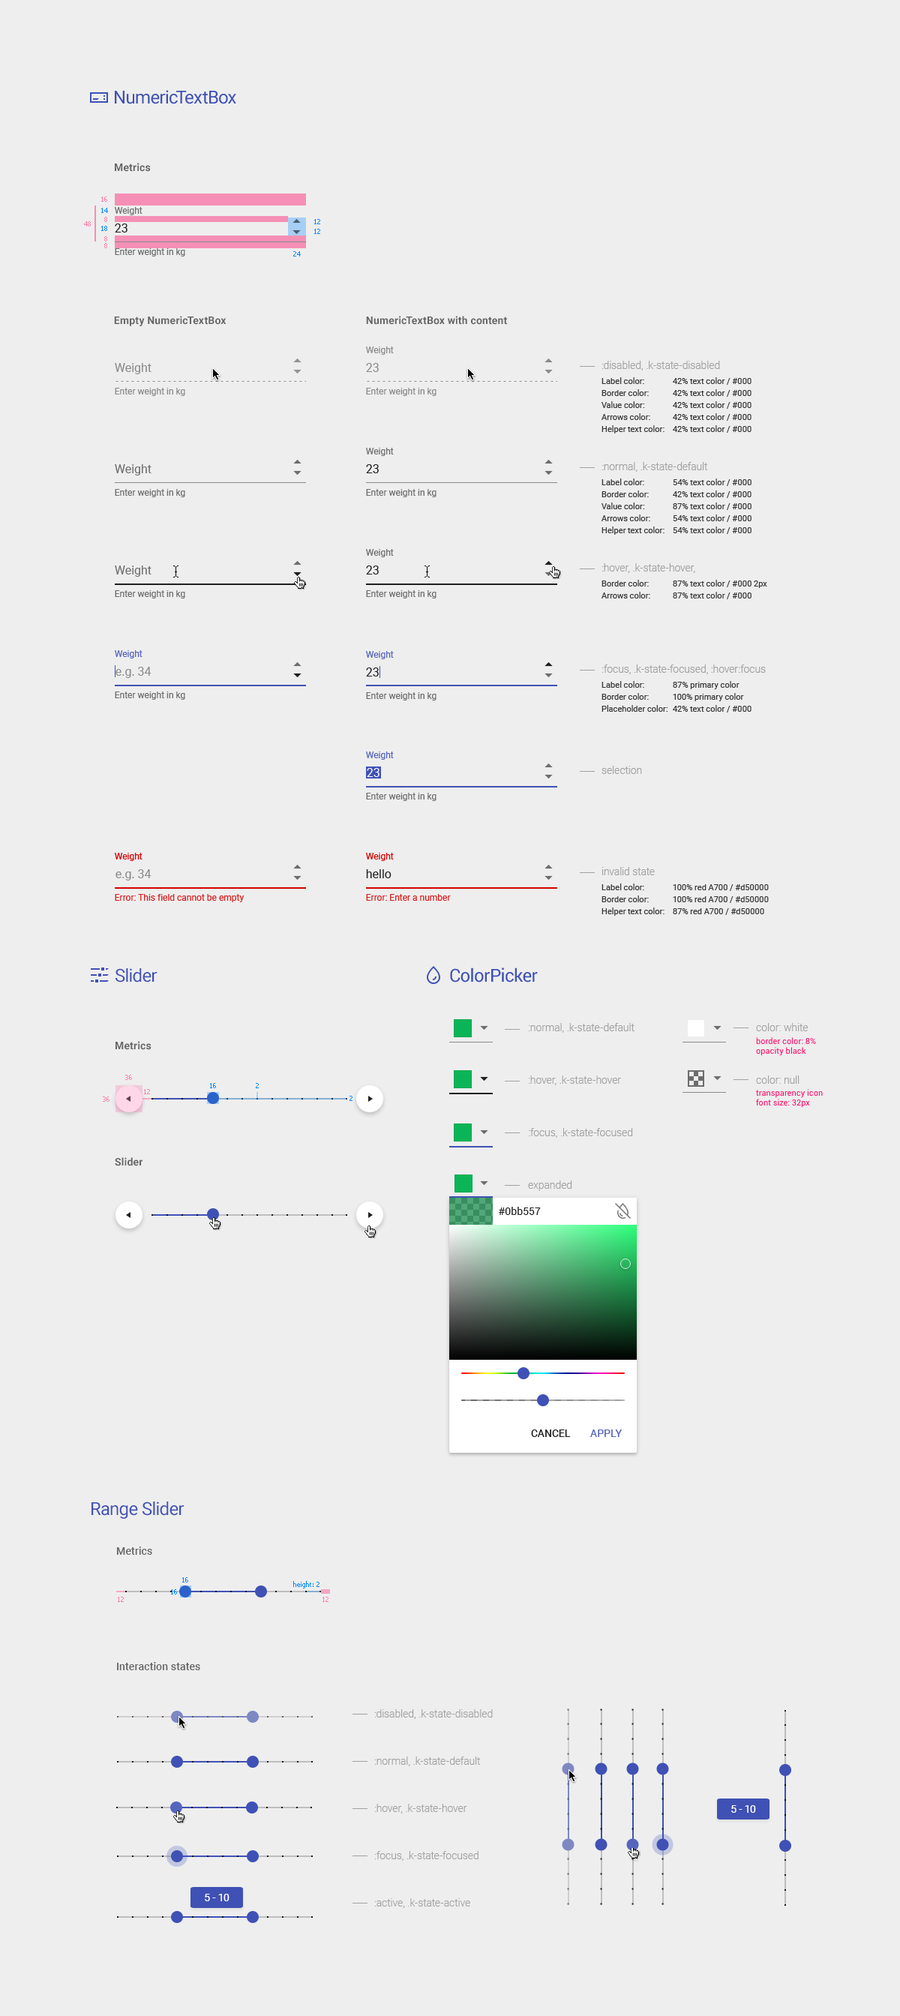
<style>
.page{position:relative;width:900px;height:2016px;background:#eeeeee}
.page>*{position:absolute;margin:0}
.t1{font:18px "Roboto-Regular";letter-spacing:-0.025em;color:#3f51b5}
.t2{font:10.5px "Roboto-Bold";letter-spacing:0.01em;color:#656565}
.t3{font:6.8px "Tahoma";color:#ff7cae}
.t4{font:6.8px "Tahoma";color:#008aff}
.t5{font:9px "Roboto-Regular";color:#6d6d6d}
.t6{font:12px "Roboto-Regular";color:#1f1f1f}
.t7{font:9px "Roboto-Regular";color:#8a8a8a}
.t8{font:12px "Roboto-Regular";color:#8a8a8a}
.t9{font:8.2px/12px "Roboto-Regular";color:#383838}
.t10{font:8.2px/54px "Roboto-Regular";color:#383838}
.t11{font:12px "Roboto-Regular";color:#6d6d6d}
.t12{font:9px "Roboto-Regular";color:#3f51b5}
.t13{font:12px "Roboto-Regular";color:#ffffff}
.t14{font:9px "Roboto-Regular";color:#d50000}
.t15{font:9px "Roboto-Regular";color:#d81f1f}
.t16{font:10.5px/52.5px "Roboto-Light";color:#a1a1a1}
.t17{font:8.2px "Roboto-Regular";color:#ff0061}
.t18{font:10.5px "Roboto-Regular";color:#212121}
.t19{font:10.5px "Roboto-Medium";color:#212121;text-transform:uppercase}
.t20{font:10.5px "Roboto-Medium";color:#5868bf;text-transform:uppercase}
.t21{font:10.5px "Roboto-Medium";letter-spacing:0.01em;color:#656565}
.t22{font:10.5px/47.2px "Roboto-Light";color:#a1a1a1}
.t23{font:10.5px "Roboto-Regular";color:#ffffff}
</style>
<div class="page">
<p class="t1" style="left:115px;top:90px;width:121px;height:14px">NumericTextBox</p>
<p class="t2" style="left:115px;top:163px;width:36px;height:9px">Metrics</p>
<p class="t3" style="left:101px;top:196px;width:6px;height:6px">16</p>
<p class="t4" style="left:101px;top:208px;width:7px;height:5px">14</p>
<p class="t5" style="left:115px;top:207px;width:27px;height:8px">Weight</p>
<p class="t3" style="left:84px;top:221px;width:7px;height:5px">48</p>
<p class="t3" style="left:104px;top:217px;width:3px;height:5px">8</p>
<p class="t4" style="left:314px;top:219px;width:6px;height:5px">12</p>
<p class="t4" style="left:101px;top:226px;width:6px;height:5px">18</p>
<p class="t6" style="left:115px;top:224px;width:13px;height:8px">23</p>
<p class="t4" style="left:314px;top:229px;width:6px;height:5px">12</p>
<p class="t3" style="left:104px;top:236px;width:3px;height:6px">8</p>
<p class="t3" style="left:104px;top:243px;width:3px;height:5px">8</p>
<p class="t5" style="left:115px;top:248px;width:70px;height:8px">Enter weight in kg</p>
<p class="t4" style="left:293px;top:251px;width:8px;height:5px">24</p>
<p class="t2" style="left:114px;top:316px;width:112px;height:10px">Empty NumericTextBox</p>
<p class="t2" style="left:366px;top:316px;width:141px;height:9px">NumericTextBox with content</p>
<p class="t7" style="left:366px;top:346px;width:28px;height:9px">Weight</p>
<p class="t8" style="left:115px;top:363px;width:37px;height:11px">Weight</p>
<p class="t8" style="left:366px;top:363px;width:13px;height:9px">23</p>
<p class="t9" style="left:602px;top:377px;width:62px;height:57px"><span class="t10">Label color:<br></span>Border color:<br>Value color:<br>Arrows color:<br>Helper text color:</p>
<p class="t9" style="left:673px;top:377px;width:79px;height:56px"><span class="t10">42% text color / #000<br></span>42% text color / #000<br>42% text color / #000<br>42% text color / #000<br>42% text color / #000</p>
<p class="t7" style="left:115px;top:388px;width:70px;height:8px">Enter weight in kg</p>
<p class="t7" style="left:366px;top:388px;width:70px;height:8px">Enter weight in kg</p>
<p class="t5" style="left:366px;top:448px;width:28px;height:8px">Weight</p>
<p class="t11" style="left:115px;top:464px;width:37px;height:12px">Weight</p>
<p class="t6" style="left:366px;top:464px;width:13px;height:9px">23</p>
<p class="t9" style="left:602px;top:478px;width:62px;height:57px"><span class="t10">Label color:<br></span>Border color:<br>Value color:<br>Arrows color:<br>Helper text color:</p>
<p class="t9" style="left:673px;top:478px;width:79px;height:56px"><span class="t10">54% text color / #000<br></span>42% text color / #000<br>87% text color / #000<br>54% text color / #000<br>54% text color / #000</p>
<p class="t5" style="left:115px;top:489px;width:70px;height:8px">Enter weight in kg</p>
<p class="t5" style="left:366px;top:489px;width:70px;height:8px">Enter weight in kg</p>
<p class="t5" style="left:366px;top:549px;width:28px;height:8px">Weight</p>
<p class="t11" style="left:115px;top:566px;width:37px;height:11px">Weight</p>
<p class="t6" style="left:366px;top:566px;width:13px;height:8px">23</p>
<p class="t9" style="left:602px;top:580px;width:48px;height:18px">Border color:<br>Arrows color:</p>
<p class="t9" style="left:673px;top:580px;width:94px;height:19px">87% text color / #000 2px<br>87% text color / #000</p>
<p class="t5" style="left:115px;top:590px;width:70px;height:8px">Enter weight in kg</p>
<p class="t5" style="left:366px;top:590px;width:70px;height:8px">Enter weight in kg</p>
<p class="t12" style="left:115px;top:650px;width:27px;height:8px;opacity:0.87">Weight</p>
<p class="t12" style="left:366px;top:651px;width:28px;height:8px;opacity:0.87">Weight</p>
<p class="t8" style="left:116px;top:667px;width:36px;height:11px">e.g. 34</p>
<p class="t6" style="left:366px;top:668px;width:13px;height:8px">23</p>
<p class="t9" style="left:602px;top:681px;width:66px;height:31px"><span class="t10">Label color:<br></span>Border color:<br>Placeholder color:</p>
<p class="t9" style="left:673px;top:681px;width:79px;height:31px"><span class="t10">87% primary color<br></span>100% primary color<br>42% text color / #000</p>
<p class="t5" style="left:115px;top:692px;width:70px;height:8px">Enter weight in kg</p>
<p class="t5" style="left:366px;top:692px;width:70px;height:8px">Enter weight in kg</p>
<p class="t12" style="left:366px;top:752px;width:28px;height:8px;opacity:0.87">Weight</p>
<p class="t13" style="left:367px;top:768px;width:13px;height:9px">23</p>
<p class="t5" style="left:366px;top:793px;width:70px;height:8px">Enter weight in kg</p>
<p class="t14" style="left:115px;top:853px;width:27px;height:8px">Weight</p>
<p class="t14" style="left:366px;top:853px;width:28px;height:8px">Weight</p>
<p class="t8" style="left:116px;top:869px;width:36px;height:11px">e.g. 34</p>
<p class="t6" style="left:366px;top:869px;width:26px;height:9px">hello</p>
<p class="t15" style="left:115px;top:894px;width:129px;height:8px">Error: This field cannot be empty</p>
<p class="t15" style="left:366px;top:894px;width:85px;height:7px">Error: Enter a number</p>
<p class="t9" style="left:602px;top:884px;width:62px;height:32px"><span class="t10">Label color:<br></span>Border color:<br>Helper text color:</p>
<p class="t9" style="left:673px;top:884px;width:96px;height:31px"><span class="t10">100% red </span>A700 / #d50000<br>100% red A700 / #d50000<br>87% red A700 / #d50000</p>
<p class="t1" style="left:116px;top:968px;width:42px;height:14px">Slider</p>
<p class="t1" style="left:450px;top:968px;width:88px;height:14px">ColorPicker</p>
<p class="t16" style="left:528px;top:1023px;width:106px;height:168px">:normal, .k-state-default<br>:hover, .k-state-hover<br>:focus, .k-state-focused<br>expanded</p>
<p class="t16" style="left:756px;top:1023px;width:52px;height:61px">color: white<br>color: null</p>
<p class="t17" style="left:756px;top:1037px;width:60px;height:19px">border color: 8% opacity black</p>
<p class="t2" style="left:116px;top:1041px;width:36px;height:9px">Metrics</p>
<p class="t3" style="left:125px;top:1075px;width:7px;height:5px">36</p>
<p class="t4" style="left:210px;top:1083px;width:6px;height:5px">16</p>
<p class="t4" style="left:256px;top:1083px;width:3px;height:5px">2</p>
<p class="t3" style="left:103px;top:1096px;width:7px;height:6px">36</p>
<p class="t3" style="left:144px;top:1089px;width:6px;height:5px">12</p>
<p class="t4" style="left:350px;top:1096px;width:2px;height:5px">2</p>
<p class="t17" style="left:756px;top:1089px;width:67px;height:19px">transparency icon font size: 32px</p>
<p class="t2" style="left:115px;top:1157px;width:28px;height:9px">Slider</p>
<p class="t18" style="left:499px;top:1207px;width:42px;height:8px">#0bb557</p>
<p class="t19" style="left:531px;top:1430px;width:40px;height:7px">cancel</p>
<p class="t20" style="left:590px;top:1430px;width:32px;height:7px">APPLY</p>
<p class="t1" style="left:92px;top:1502px;width:92px;height:17px">Range Slider</p>
<p class="t21" style="left:116px;top:1546px;width:36px;height:9px">Metrics</p>
<p class="t4" style="left:182px;top:1577px;width:6px;height:5px">16</p>
<p class="t4" style="left:171px;top:1589px;width:6px;height:5px">16</p>
<p class="t4" style="left:293px;top:1581px;width:27px;height:7px">height: 2</p>
<p class="t3" style="left:118px;top:1597px;width:6px;height:5px">12</p>
<p class="t3" style="left:322px;top:1597px;width:6px;height:5px">12</p>
<p class="t21" style="left:117px;top:1662px;width:83px;height:8px">Interaction states</p>
<p class="t22" style="left:374px;top:1709px;width:119px;height:199px">:disabled, .k-state-disabled<br>:normal, .k-state-default<br>:hover, .k-state-hover<br>:focus, .k-state-focused<br>:active, .k-state-active</p>
<p class="t23" style="left:731px;top:1805px;width:25px;height:8px">5 - 10</p>
<p class="t23" style="left:205px;top:1894px;width:25px;height:7px">5 - 10</p>
</div>
